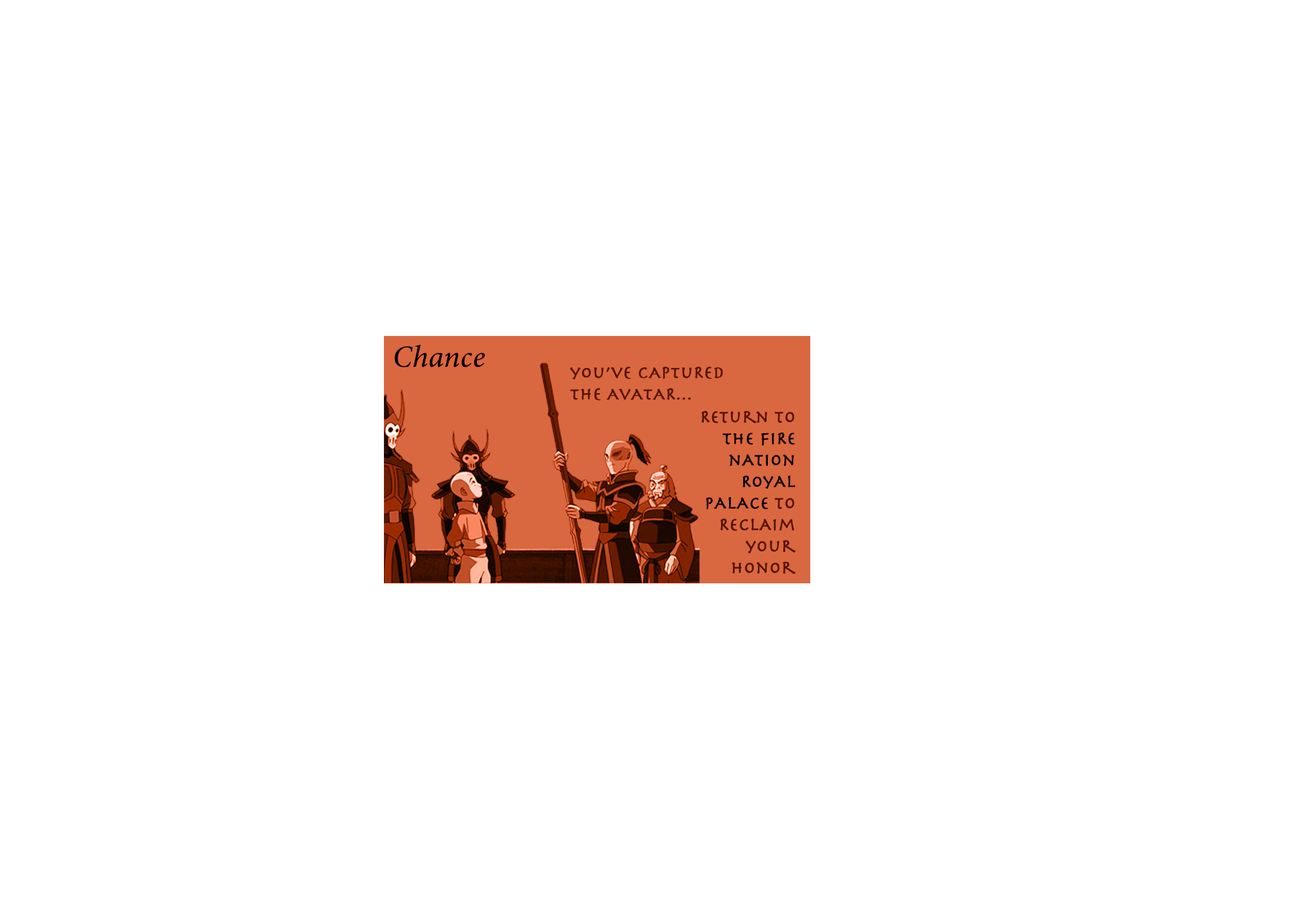
<style>
.page{position:relative;width:1292px;height:923px;background:#ffffff}
.page>*{position:absolute;margin:0}
.t1{font:30.8px "MinionConceptItalic-MediumItalic";color:#000000;font-weight:bold}
.t2{font:17.9px "Herculanum";color:#4e1501;font-weight:bold}
.t3{font:17.9px "Herculanum";font-weight:bold}
</style>
<div class="page">
<p class="t1" style="left:394px;top:345px;width:91px;height:22px">Chance</p>
<p class="t2" style="left:570px;top:367px;width:153px;height:34px">you’ve cAptuRed<br>the AvAtAR...</p>
<p class="t3" style="left:701px;top:410px;width:95px;height:164px;text-align:right">Return to the fiRe nAtion RoyAl pAlAce to ReclAim your honor</p>
</div>
